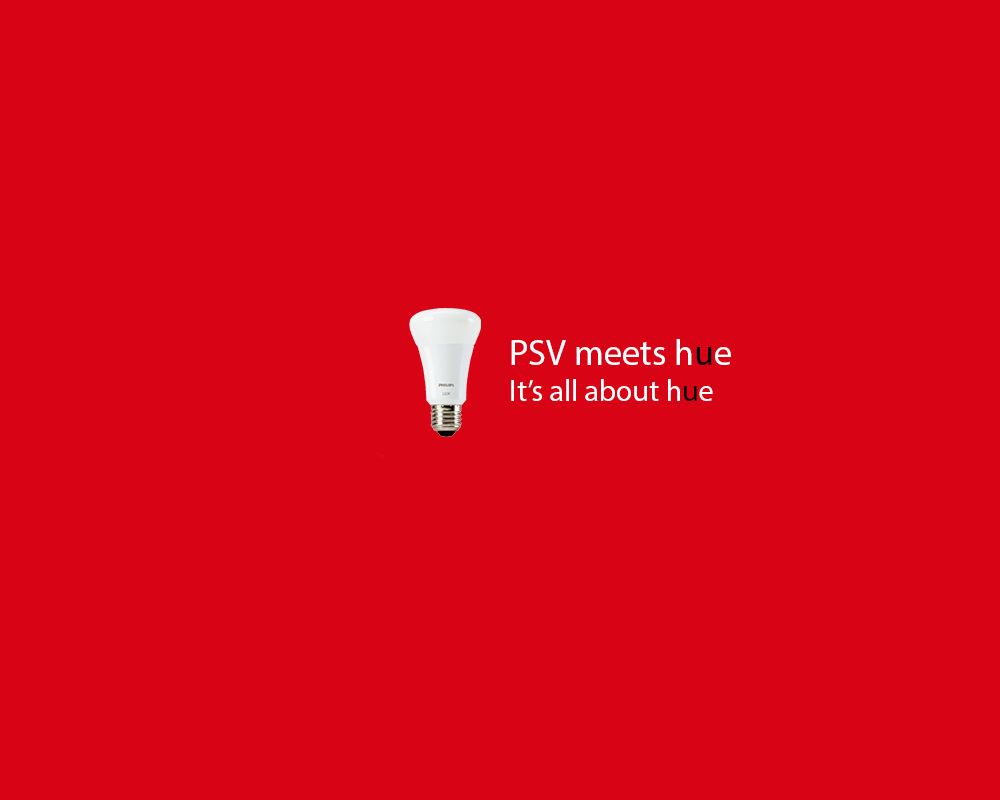
<style>
.page{position:relative;width:1000px;height:800px;background:#d80315}
.page>*{position:absolute;margin:0}
.t1{font:30px "MyriadPro-Regular";color:#ffffff}
.t2{font:36px "MyriadPro-Regular";color:#ffffff}
.t3{font:36px "MyriadPro-Regular";color:#000000}
.t4{font:30px "MyriadPro-Regular";color:#000000}
</style>
<div class="page">
<p class="t1" style="left:511px;top:339px;width:220px;height:62px"><span class="t2">PSV meets h</span><span class="t3">u</span><span class="t2">e<br></span>It’s all about h<span class="t4">u</span>e</p>
</div>
